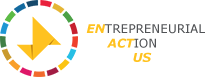
<style>
.page{position:relative;width:205px;height:77px;background:#ffffff}
.page>*{position:absolute;margin:0}
.t1{font:12px "Verdana";color:#515356}
.t2{font:12px "Verdana-BoldItalic";color:#ffc220}
</style>
<div class="page">
<p class="t1" style="left:86px;top:24px;width:119px;height:38px"><span class="t2">EN</span>TREPRENEURIAL<br>     <span class="t2">ACT</span>ION <br>           <span class="t2">US</span></p>
</div>
